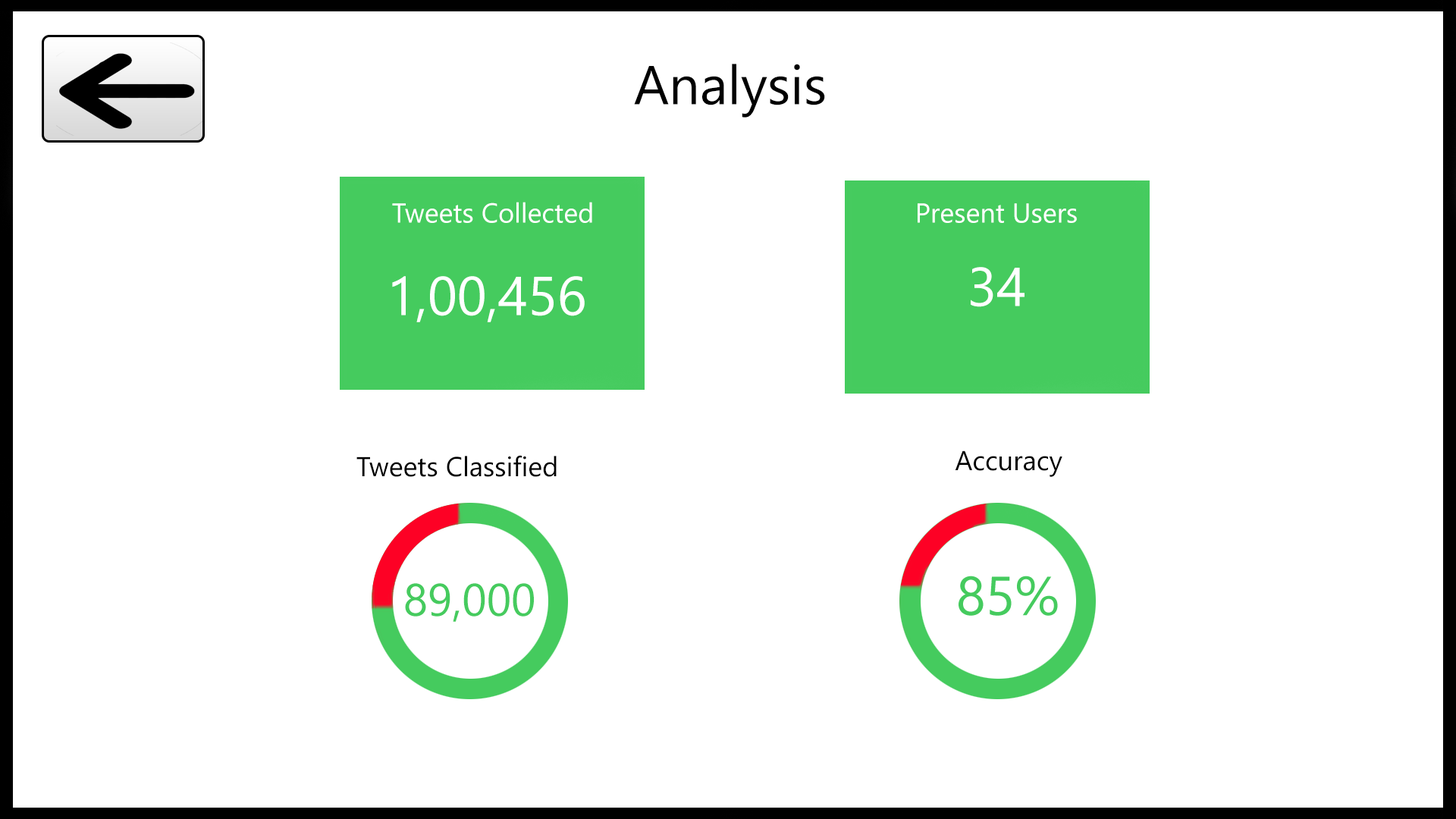
<style>
.page{position:relative;width:1456px;height:819px;background:#ffffff}
.page>*{position:absolute;margin:0}
.t1{font:54.6px "SegoeUI";color:#000000}
.t2{font:27.3px "SegoeUI";color:#ffffff}
.t3{font:54.6px "SegoeUI";color:#ffffff}
.t4{font:27.3px "SegoeUI";color:#000000}
.t5{font:45.5px "SegoeUI";color:#45cb5e}
</style>
<div class="page">
<p class="t1" style="left:634px;top:64px;width:191px;height:54px">Analysis</p>
<p class="t2" style="left:392px;top:202px;width:200px;height:21px">Tweets Collected</p>
<p class="t2" style="left:918px;top:203px;width:159px;height:20px">Present Users</p>
<p class="t3" style="left:971px;top:267px;width:53px;height:40px">34</p>
<p class="t3" style="left:392px;top:276px;width:193px;height:46px">1,00,456</p>
<p class="t4" style="left:356px;top:455px;width:201px;height:22px">Tweets Classified</p>
<p class="t4" style="left:955px;top:450px;width:107px;height:27px">Accuracy</p>
<p class="t5" style="left:405px;top:583px;width:129px;height:39px">89,000</p>
</div>
